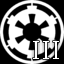
<style>
.page{position:relative;width:64px;height:64px;background:#000000}
.page>*{position:absolute;margin:0}
.t1{font:23.9px "TrajanPro-Regular";color:#ffffff}
</style>
<div class="page">
<p class="t1" style="left:33px;top:41px;width:26px;height:18px">III</p>
</div>
